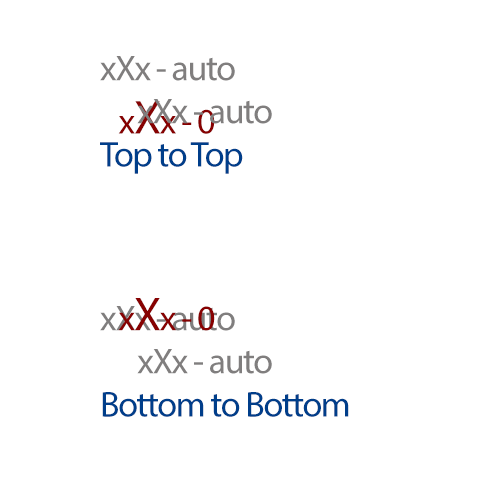
<style>
.page{position:relative;width:500px;height:500px;background:#ffffff}
.page>*{position:absolute;margin:0}
.t1{font:36px "MyriadPro-Regular";letter-spacing:-0.04em;color:#807e7e}
.t2{font:36px/0px "MyriadPro-Regular";letter-spacing:-0.04em;color:#870101}
.t3{font:48px/0px "MyriadPro-Regular";letter-spacing:-0.04em;color:#870101}
.t4{font:36px "MyriadPro-Regular";letter-spacing:-0.04em;color:#003e8a}
</style>
<div class="page">
<p class="t1" style="left:100px;top:56px;width:172px;height:118px">xXx - auto<br> <span class="t2">  x</span><span class="t3">X</span><span class="t2">x - 0<br> </span>     xXx - auto<br><span class="t4">Top to Top</span></p>
<p class="t4" style="left:100px;top:298px;width:249px;height:119px"><span class="t1">xXx - auto<br> </span><span class="t2">  x</span><span class="t3">X</span><span class="t2">x - 0<br> </span><span class="t1">     xXx - auto<br></span>Bottom to Bottom</p>
</div>
